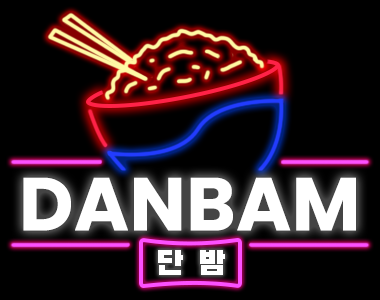
<style>
.page{position:relative;width:380px;height:300px;background:#000000}
.page>*{position:absolute;margin:0}
.t1{font:75px "Poppins-Bold";letter-spacing:0.005em;color:#ffffff}
.t2{font:33.3px "BlackHanSans-Regular";letter-spacing:0.425em;color:#ffffff}
</style>
<div class="page">
<p class="t1" style="left:23px;top:177px;width:333px;height:54px">DANBAM</p>
<p class="t2" style="left:158px;top:250px;width:67px;height:25px">단밤</p>
</div>
